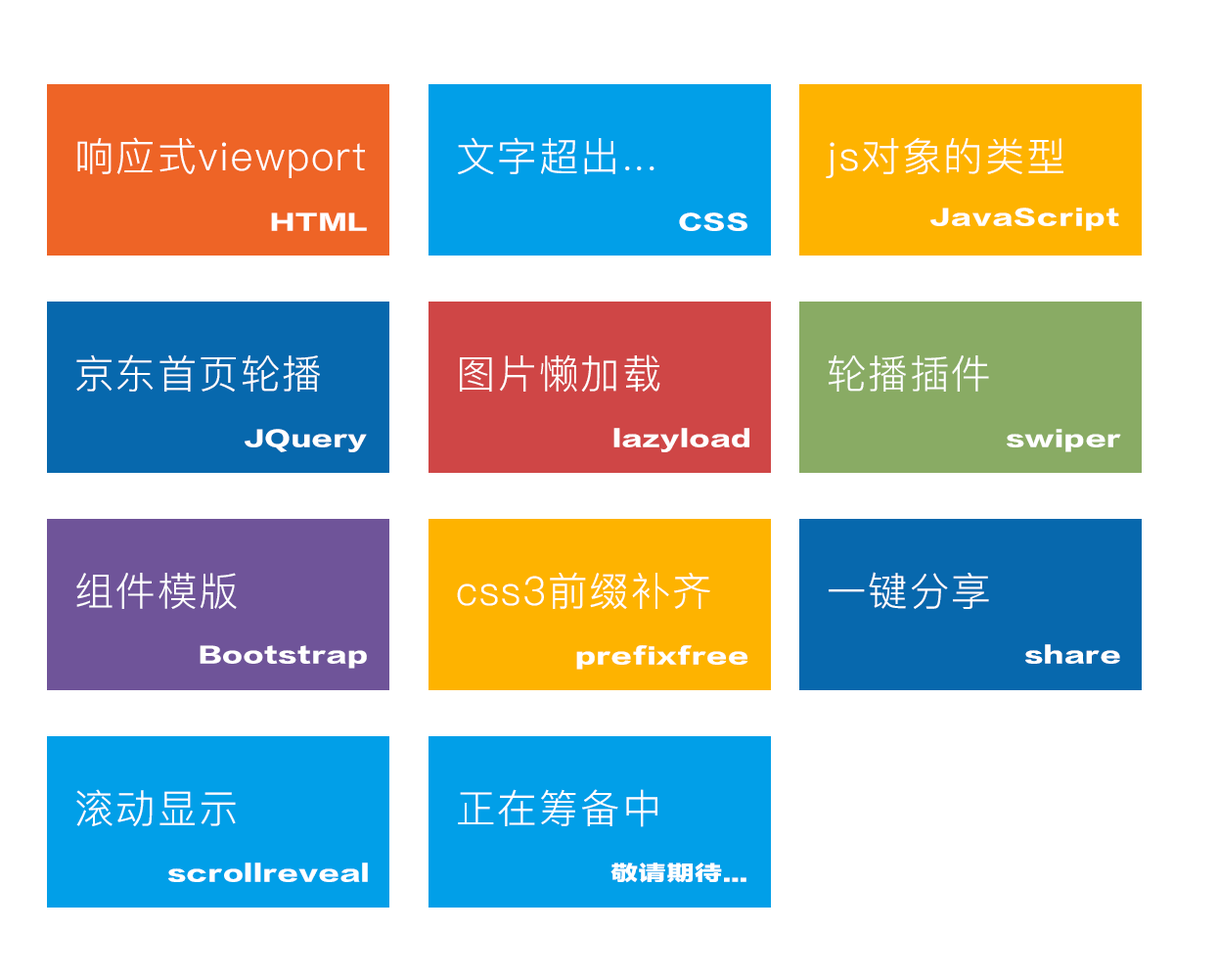
<style>
.page{position:relative;width:1218px;height:979px;background:#ffffff}
.page>*{position:absolute;margin:0}
.t1{font:39.6px "PingFang-SC-Regular";letter-spacing:0.05em;color:#ffffff}
.t2{font:27.4px "FZLTTHBK--GBK1-0";letter-spacing:0.05em;color:#ffffff}
.t3{font:27.4px "FZLTTHBK--GBK1-0";letter-spacing:0.05em;color:#ffffff;text-transform:uppercase}
.t4{font:27.4px "FZLTTHBJW--GB1-0";letter-spacing:0.025em;color:#ffffff}
.t5{font:27.5px "FZLTTHBJW--GB1-0";letter-spacing:0.025em;color:#ffffff}
</style>
<div class="page">
<p class="t1" style="left:77px;top:137px;width:288px;height:41px">响应式viewport</p>
<p class="t1" style="left:458px;top:137px;width:197px;height:37px">文字超出...</p>
<p class="t1" style="left:826px;top:137px;width:238px;height:41px">js对象的类型</p>
<p class="t2" style="left:931px;top:207px;width:189px;height:24px"><span class="t3">j</span>ava<span class="t3">s</span>cript</p>
<p class="t4" style="left:271px;top:212px;width:96px;height:19px">HTML</p>
<p class="t3" style="left:679px;top:212px;width:69px;height:19px">CSS</p>
<p class="t1" style="left:76px;top:354px;width:244px;height:37px">京东首页轮播</p>
<p class="t1" style="left:460px;top:354px;width:201px;height:38px">图片懒加载</p>
<p class="t1" style="left:829px;top:355px;width:160px;height:36px">轮播插件</p>
<p class="t5" style="left:245px;top:429px;width:122px;height:23px">JQuery</p>
<p class="t5" style="left:614px;top:428px;width:136px;height:24px">lazyload</p>
<p class="t5" style="left:1007px;top:429px;width:115px;height:23px">swiper</p>
<p class="t1" style="left:76px;top:573px;width:161px;height:36px">组件模版</p>
<p class="t1" style="left:457px;top:572px;width:254px;height:37px">css3前缀补齐</p>
<p class="t1" style="left:829px;top:572px;width:160px;height:37px">一键分享</p>
<p class="t5" style="left:200px;top:645px;width:167px;height:23px">Bootstrap</p>
<p class="t5" style="left:576px;top:645px;width:173px;height:24px">prefixfree</p>
<p class="t5" style="left:1026px;top:644px;width:95px;height:20px">share</p>
<p class="t1" style="left:76px;top:789px;width:160px;height:37px">滚动显示</p>
<p class="t1" style="left:458px;top:789px;width:200px;height:38px">正在筹备中</p>
<p class="t5" style="left:168px;top:862px;width:200px;height:20px">scrollreveal</p>
<p class="t5" style="left:611px;top:862px;width:136px;height:21px">敬请期待...</p>
</div>
